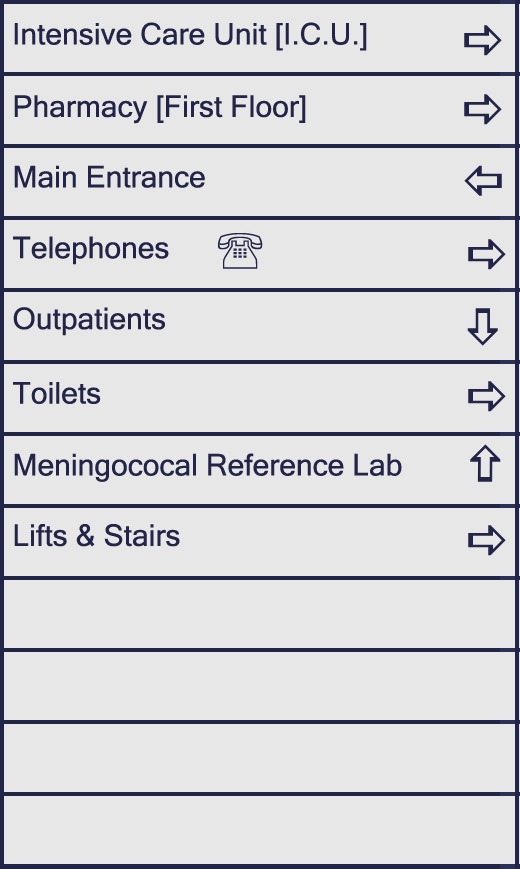
<style>
.page{position:relative;width:520px;height:869px;background:#e7e7e7}
.page>*{position:absolute;margin:0}
.t1{font:30px "MicrosoftSansSerif";color:#222547}
</style>
<div class="page">
<p class="t1" style="left:14px;top:95px;width:292px;height:29px">Pharmacy [First Floor]</p>
<p class="t1" style="left:14px;top:165px;width:191px;height:23px">Main Entrance</p>
<p class="t1" style="left:13px;top:236px;width:156px;height:29px">Telephones</p>
<p class="t1" style="left:13px;top:307px;width:152px;height:29px">Outpatients</p>
<p class="t1" style="left:13px;top:382px;width:88px;height:22px">Toilets</p>
<p class="t1" style="left:14px;top:453px;width:388px;height:29px">Meningococal Reference Lab</p>
<p class="t1" style="left:14px;top:524px;width:166px;height:23px">Lifts &amp; Stairs</p>
</div>
